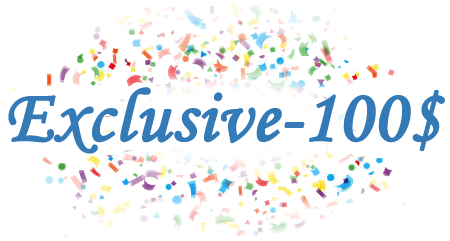
<style>
.page{position:relative;width:450px;height:241px;background:#ffffff}
.page>*{position:absolute;margin:0}
.t1{font:75px "MonotypeCorsiva";color:#337ab7;font-weight:bold}
</style>
<div class="page">
<p class="t1" style="left:8px;top:87px;width:437px;height:67px">Exclusive-100$</p>
</div>
